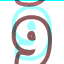
<style>
.page{position:relative;width:64px;height:64px;background:#ffffff}
.page>*{position:absolute;margin:0}
.t1{font:66px "LilitaOne";color:#ffffff}
</style>
<div class="page">
<p class="t1" style="left:15px;top:8px;width:33px;height:48px">9</p>
</div>
